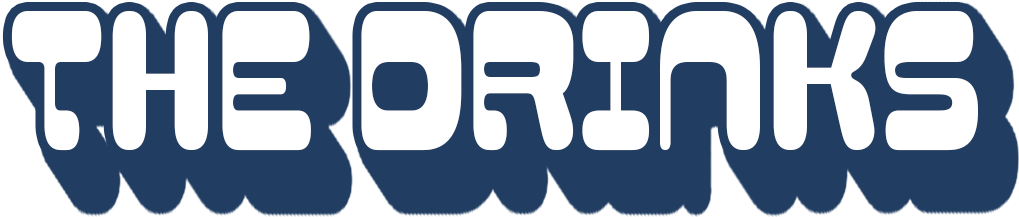
<style>
.page{position:relative;width:1019px;height:217px;background:#213e62}
.page>*{position:absolute;margin:0}
.t1{font:231.7px "CaplesDemo-Regular";color:#ffffff;scale:0.65 1}
</style>
<div class="page">
<p class="t1" style="left:11px;top:11px;width:967px;height:140px">THE DRINKS</p>
</div>
